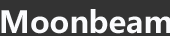
<style>
.page{position:relative;width:170px;height:36px;background:#333333}
.page>*{position:absolute;margin:0}
.t1{font:30px "MicrosoftYaHei-Bold";color:#fafbfd}
</style>
<div class="page">
<p class="t1" style="left:1px;top:9px;width:170px;height:25px">Moonbeam</p>
</div>
